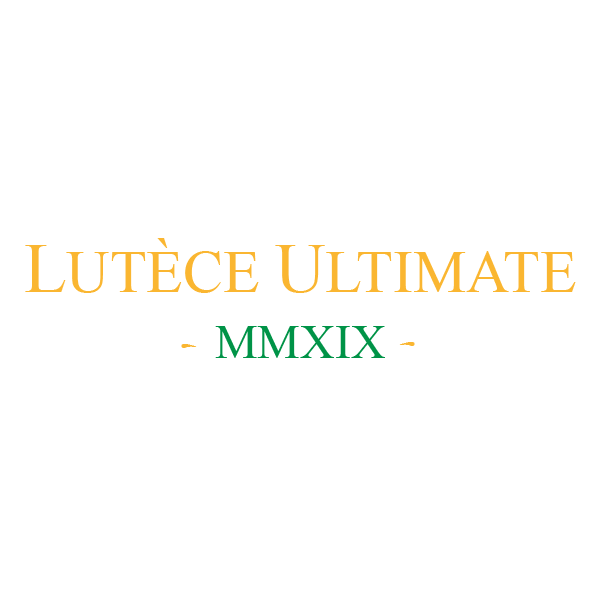
<style>
.page{position:relative;width:600px;height:600px;background:#ffffff}
.page>*{position:absolute;margin:0}
.t1{font:60px "TimesNewRomanPSMT";color:#fab631}
.t2{font:70px "TimesNewRomanPSMT";color:#fab631}
.t3{font:48px "TimesNewRomanPSMT";color:#009347}
.t4{font:48px "Chiller-Regular";color:#fab631}
</style>
<div class="page">
<p class="t1" style="left:25px;top:238px;width:551px;height:55px"><span class="t2">L</span>UTÈCE <span class="t2">U</span>LTIMATE</p>
<p class="t3" style="left:215px;top:326px;width:170px;height:32px">MMXIX</p>
<p class="t4" style="left:181px;top:344px;width:16px;height:4px">-</p>
</div>
